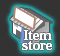
<style>
.page{position:relative;width:60px;height:56px;background:#333333}
.page>*{position:absolute;margin:0}
.t1{font:14px/10px "HeiseiMinStd-W7";color:#ffffff}
</style>
<div class="page">
<p class="t1" style="left:22px;top:30px;width:30px;height:20px;text-align:center">Item<br>store</p>
</div>
